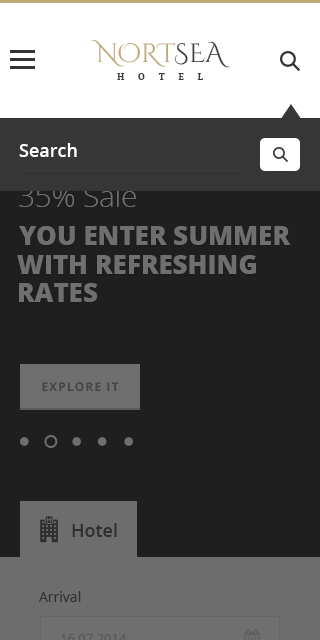
<style>
.page{position:relative;width:320px;height:640px;background:#1f1f1f}
.page>*{position:absolute;margin:0}
.t1{font:26.3px "CinzelDecorative-Regular";color:#c0a878;text-transform:uppercase}
.t2{font:26.3px "CinzelDecorative-Regular";color:#3a3a3a;text-transform:uppercase}
.t3{font:9.2px "PTSerif-Bold";letter-spacing:1.5em;color:#3a3a3a;text-transform:uppercase}
.t4{font:18px "OpenSans-Semibold";color:#ffffff}
.t5{font:30px "OpenSans-Light";letter-spacing:-0.01em;color:#6f6f6f}
.t6{font:26px/28.6px "OpenSans-Extrabold";color:#6f6f6f;text-transform:uppercase}
.t7{font:12px "OpenSans-Bold";letter-spacing:0.1em;color:#454545;text-transform:uppercase}
.t8{font:18px "OpenSans-Semibold";color:#2f2f2f}
.t9{font:14px "OpenSans";color:#313131}
</style>
<div class="page">
<p class="t1" style="left:91px;top:40px;width:139px;height:28px">nort<span class="t2">sea</span></p>
<p class="t3" style="left:117px;top:73px;width:86px;height:7px">hotel</p>
<p class="t4" style="left:19px;top:143px;width:58px;height:14px">Search</p>
<p class="t5" style="left:19px;top:184px;width:117px;height:23px">35% Sale</p>
<p class="t6" style="left:17px;top:226px;width:274px;height:76px">You enter summer<br>with refreshing<br>rates</p>
<p class="t7" style="left:42px;top:382px;width:77px;height:10px">explore it</p>
<p class="t8" style="left:72px;top:523px;width:45px;height:14px">Hotel</p>
<p class="t9" style="left:39px;top:591px;width:42px;height:11px">Arrival</p>
</div>
